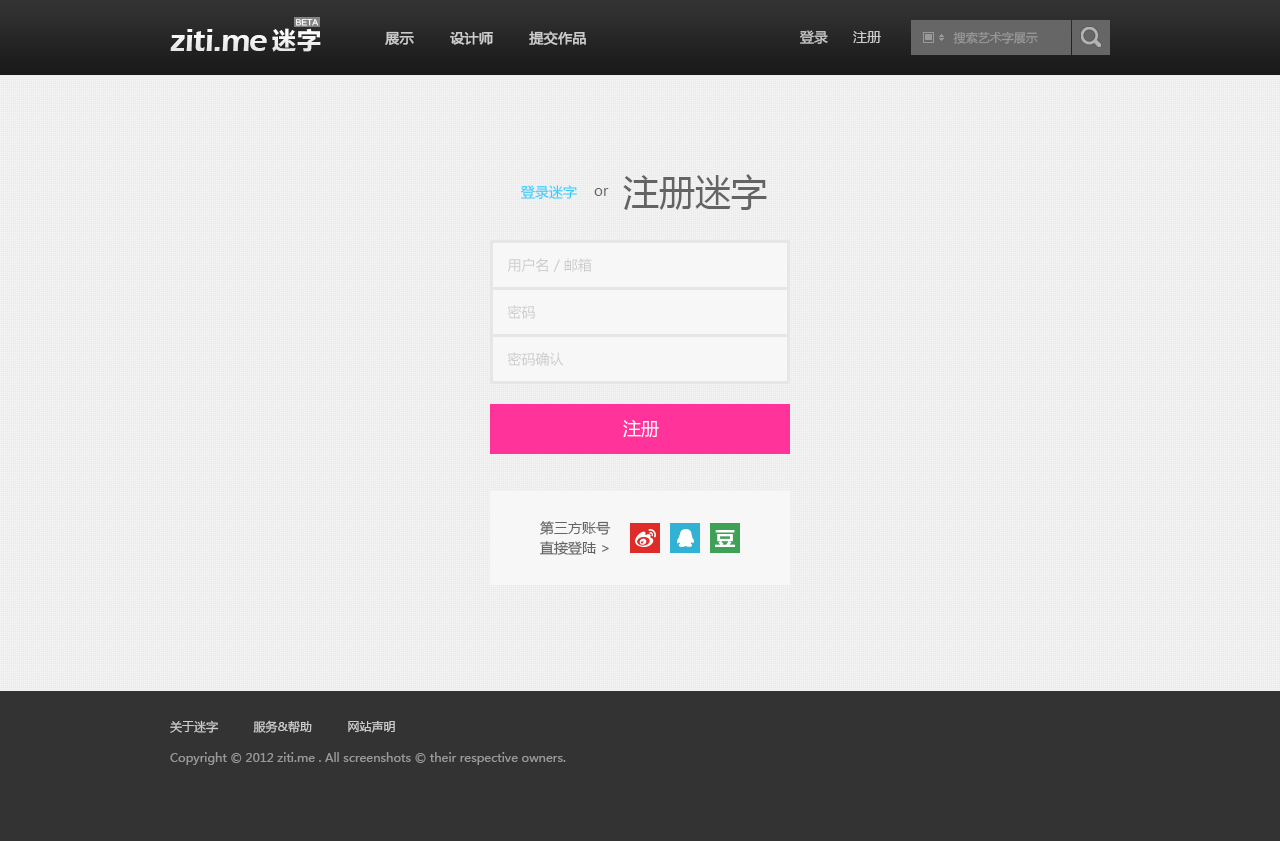
<style>
.page{position:relative;width:1280px;height:841px;background:#f2f2f2}
.page>*{position:absolute;margin:0}
.t1{font:33.3px "ErasITC-Demi";letter-spacing:-0.025em;color:#efefef}
.t2{font:25px "FZLTCHK--GBK1-0";color:#f2f2f2}
.t3{font:7.7px "FZLTHK--GBK1-0";color:#ffffff;text-transform:uppercase}
.t4{font:14px "MicrosoftYaHei";color:#cccccc}
.t5{font:14px "MicrosoftYaHei";color:#cccccc;font-weight:bold}
.t6{font:12px "MicrosoftYaHei";color:#999999}
.t7{font:36px "MicrosoftYaHei";color:#646464}
.t8{font:14px "MicrosoftYaHei";color:#33ccff}
.t9{font:14px "MicrosoftYaHei";color:#646464}
.t10{font:18px "MicrosoftYaHei";color:#ffffff}
.t11{font:14px/20px "MicrosoftYaHei";color:#646464}
.t12{font:12px "MicrosoftYaHei";color:#cccccc}
</style>
<div class="page">
<p class="t1" style="left:170px;top:29px;width:97px;height:22px">ziti.me</p>
<p class="t2" style="left:272px;top:28px;width:49px;height:24px">迷字</p>
<p class="t3" style="left:296px;top:19px;width:22px;height:7px">beta</p>
<p class="t4" style="left:800px;top:30px;width:81px;height:14px">登录      注册</p>
<p class="t5" style="left:385px;top:31px;width:201px;height:14px">展示        设计师        提交作品</p>
<p class="t6" style="left:953px;top:31px;width:85px;height:13px">搜索艺术字展示</p>
<p class="t7" style="left:623px;top:174px;width:144px;height:36px">注册迷字</p>
<p class="t8" style="left:521px;top:185px;width:56px;height:14px">登录迷字</p>
<p class="t9" style="left:594px;top:188px;width:15px;height:8px">or</p>
<p class="t4" style="left:507px;top:258px;width:85px;height:14px">用户名 / 邮箱</p>
<p class="t4" style="left:507px;top:305px;width:28px;height:14px">密码</p>
<p class="t4" style="left:507px;top:352px;width:57px;height:14px">密码确认</p>
<p class="t10" style="left:623px;top:420px;width:36px;height:18px">注册</p>
<p class="t11" style="left:540px;top:521px;width:71px;height:34px">第三方账号<br>直接登陆 &gt;</p>
<p class="t12" style="left:170px;top:720px;width:225px;height:13px">关于迷字          服务&amp;帮助          网站声明</p>
<p class="t6" style="left:170px;top:752px;width:396px;height:13px">Copyright © 2012 ziti.me . All screenshots © their respective owners.</p>
</div>
